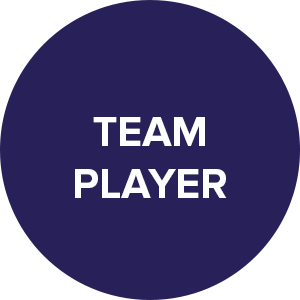
<style>
.page{position:relative;width:300px;height:300px;background:#282058}
.page>*{position:absolute;margin:0}
.t1{font:43px "ProximaNova-Bold";color:#fefdff}
</style>
<div class="page">
<p class="t1" style="left:75px;top:117px;width:152px;height:81px;text-align:center">TEAM<br>PLAYER</p>
</div>
